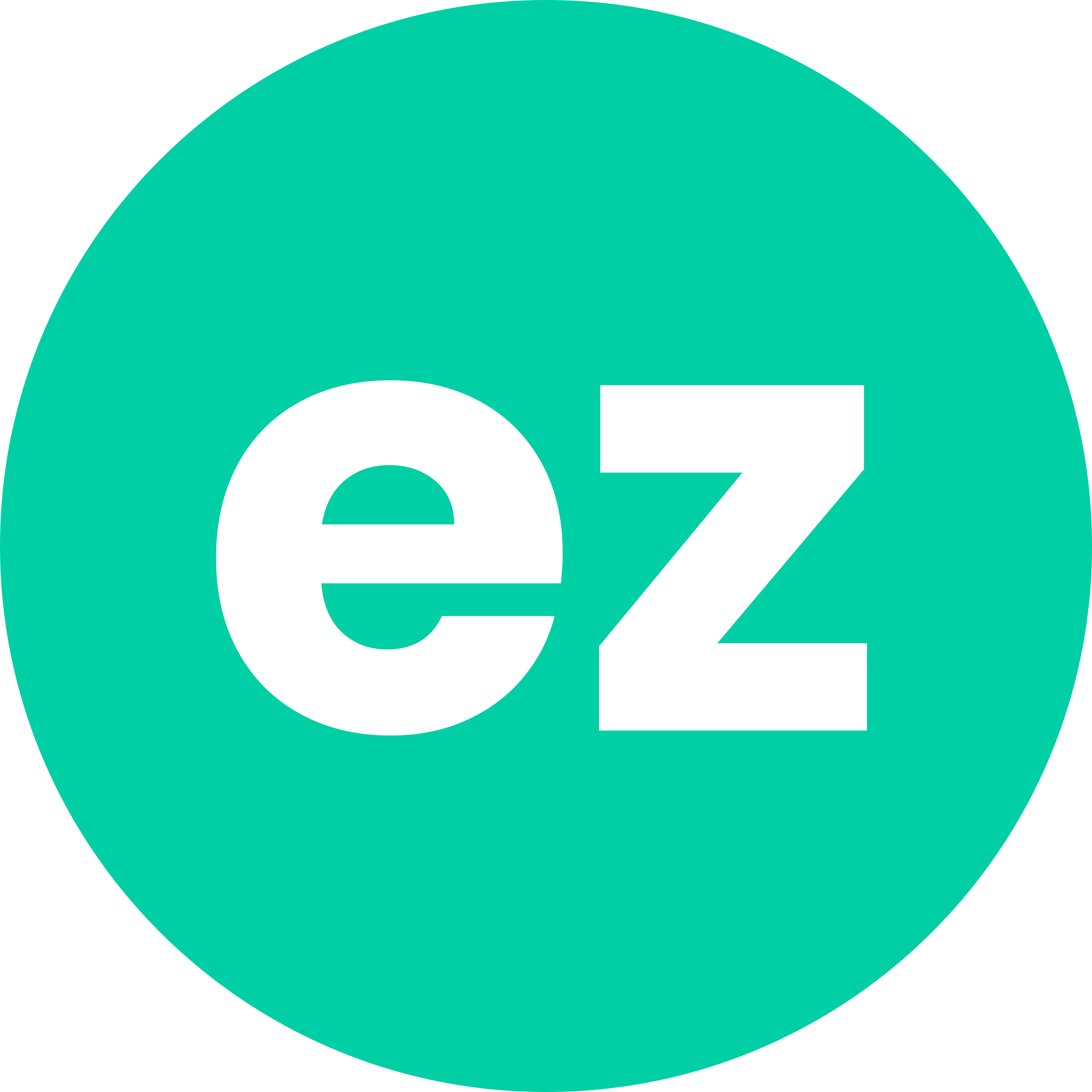
<style>
.page{position:relative;width:1092px;height:1092px;background:#00cfa5}
.page>*{position:absolute;margin:0}
.t1{font:618.8px "Poppins-Bold";color:#ffffff}
</style>
<div class="page">
<p class="t1" style="left:216px;top:380px;width:651px;height:356px">ez</p>
</div>
